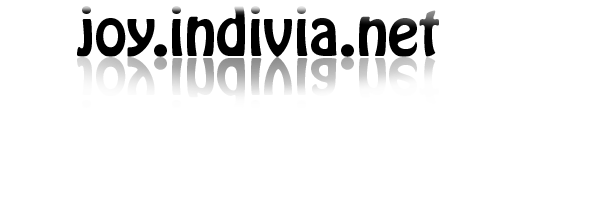
<style>
.page{position:relative;width:600px;height:200px;background:#ffffff}
.page>*{position:absolute;margin:0}
.t1{font:58.3px "HoboStd";color:#000000}
.t2{font:58.3px "HoboStd"}
</style>
<div class="page">
<p class="t1" style="left:77px;top:6px;width:362px;height:51px">joy.indivia.net</p>
<p class="t2" style="left:77px;top:57px;width:362px;height:51px">joy.indivia.net</p>
</div>
